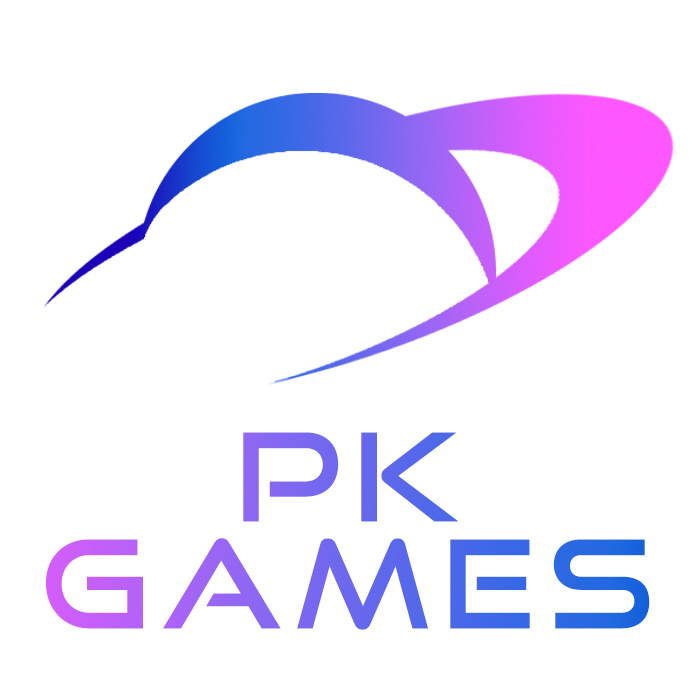
<style>
.page{position:relative;width:700px;height:700px;background:#ffffff}
.page>*{position:absolute;margin:0}
.t1{font:122px/100px "GoodTimesRg-Regular";letter-spacing:0.1em}
</style>
<div class="page">
<p class="t1" style="left:46px;top:432px;width:604px;height:198px;text-align:center">PK<br>GAMES</p>
</div>
